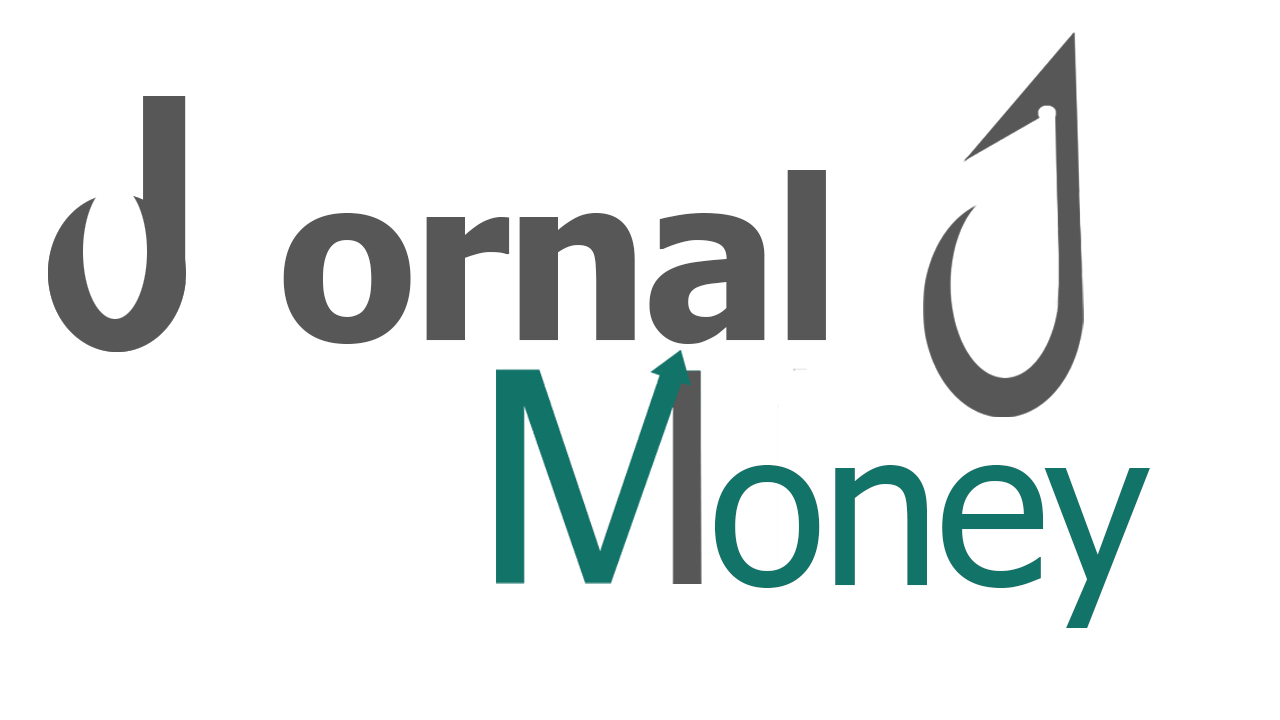
<style>
.page{position:relative;width:1280px;height:720px;background:#ffffff}
.page>*{position:absolute;margin:0}
.t1{font:224.2px "Tahoma-Bold";letter-spacing:-0.02em;color:#575757}
.t2{font:214.3px "Tahoma";letter-spacing:-0.02em;color:#127369}
</style>
<div class="page">
<p class="t1" style="left:283px;top:170px;width:543px;height:174px">ornal</p>
<p class="t2" style="left:714px;top:465px;width:436px;height:163px">oney</p>
</div>
